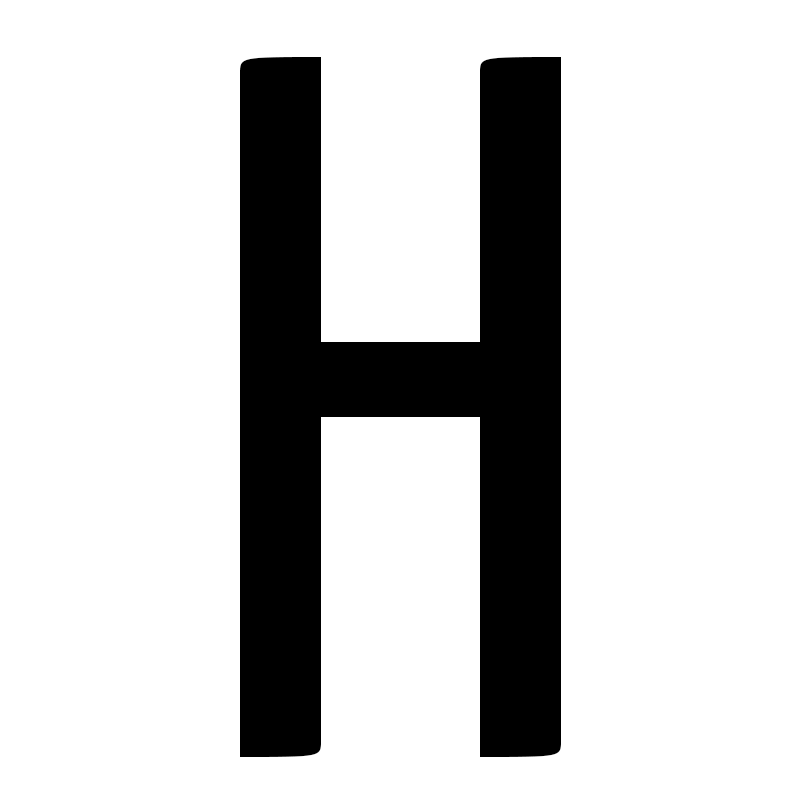
<style>
.page{position:relative;width:800px;height:800px;background:#ffffff}
.page>*{position:absolute;margin:0}
.t1{font:1000px "YanoneKaffeesatz-Regular";color:#000000;text-transform:uppercase}
</style>
<div class="page">
<p class="t1" style="left:240px;top:57px;width:321px;height:700px">H</p>
</div>
